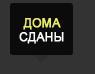
<style>
.page{position:relative;width:95px;height:74px;background:#333333}
.page>*{position:absolute;margin:0}
.t1{font:12px "ArialMT";color:#e9eb60;font-weight:bold}
.t2{font:12px "ArialMT";color:#ffffff;font-weight:bold}
</style>
<div class="page">
<p class="t1" style="left:23px;top:18px;width:38px;height:12px">ДОМА</p>
<p class="t2" style="left:19px;top:32px;width:45px;height:12px">СДАНЫ</p>
</div>
